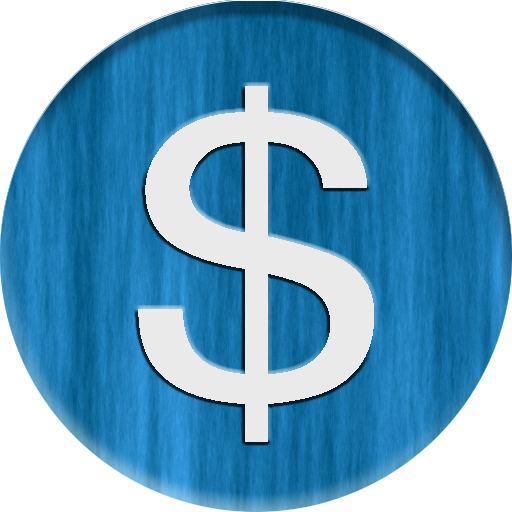
<style>
.page{position:relative;width:512px;height:512px;background:#ffffff}
.page>*{position:absolute;margin:0}
.t1{font:400px "Helvetica";color:#eaeaea;scale:1.21 1}
</style>
<div class="page">
<p class="t1" style="left:138px;top:86px;width:236px;height:356px">$</p>
</div>
